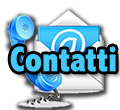
<style>
.page{position:relative;width:120px;height:110px;background:#ffffff}
.page>*{position:absolute;margin:0}
.t1{font:35.4px "AbadiMT-CondensedExtraBold";color:#44caf9}
</style>
<div class="page">
<p class="t1" style="left:10px;top:46px;width:106px;height:26px">Contatti</p>
</div>
